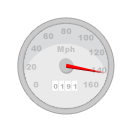
<style>
.page{position:relative;width:131px;height:131px;background:#ffffff}
.page>*{position:absolute;margin:0}
.t1{font:8.1px "Arial-Black";color:#b6b7b8}
.t2{font:8.1px "Arial-Black";color:#c4c3c3}
.t3{font:8.1px "Arial-Black";color:#c2c2c2}
.t4{font:8.1px "Arial-Black";color:#c2bdbd}
.t5{font:6.5px "Arial-Black";color:#b8b8b8}
</style>
<div class="page">
<p class="t1" style="left:61px;top:28px;width:11px;height:6px">80</p>
<p class="t1" style="left:43px;top:33px;width:11px;height:6px">60</p>
<p class="t1" style="left:78px;top:34px;width:16px;height:7px">100</p>
<p class="t1" style="left:31px;top:45px;width:11px;height:7px">40</p>
<p class="t2" style="left:57px;top:46px;width:18px;height:8px">Mph</p>
<p class="t1" style="left:89px;top:49px;width:16px;height:7px">120</p>
<p class="t3" style="left:26px;top:64px;width:11px;height:6px">20</p>
<p class="t4" style="left:91px;top:67px;width:16px;height:6px">140</p>
<p class="t3" style="left:33px;top:81px;width:6px;height:7px">0</p>
<p class="t5" style="left:53px;top:84px;width:24px;height:5px">0 1 9 1</p>
<p class="t3" style="left:83px;top:81px;width:16px;height:7px">160</p>
</div>
